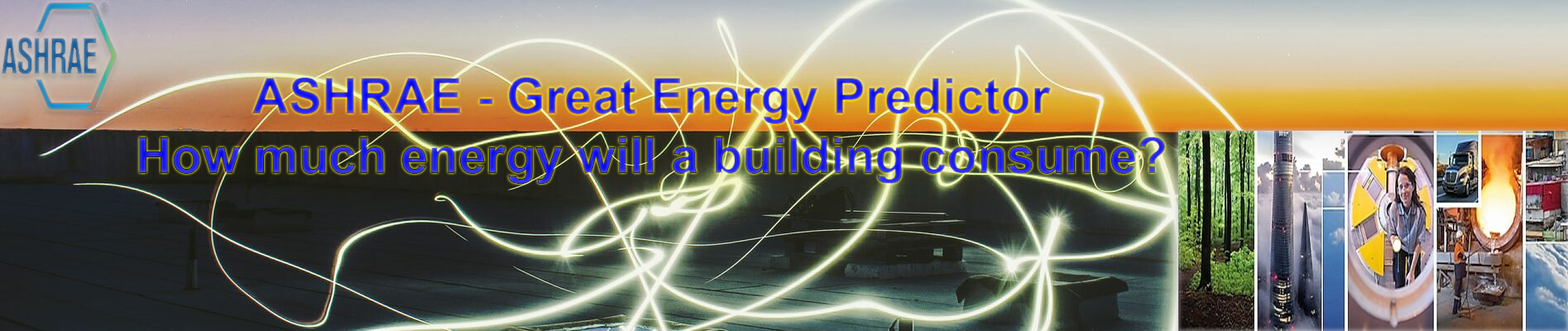
<style>
.page{position:relative;width:1568px;height:331px}
.page>*{position:absolute;margin:0}
.t1{font:49.6px "Arial-BoldMT"}
</style>
<div class="page">
<p class="t1" style="left:139px;top:77px;width:1026px;height:107px;text-align:center">ASHRAE - Great Energy Predictor<br>How much energy will a building consume?</p>
</div>
